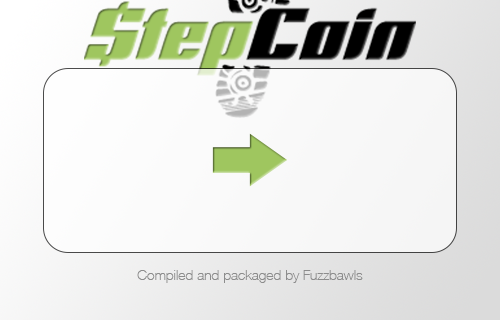
<style>
.page{position:relative;width:500px;height:320px}
.page>*{position:absolute;margin:0}
.t1{font:14px "HelveticaNeue-Thin";color:#8c8c8c}
</style>
<div class="page">
<p class="t1" style="left:137px;top:270px;width:226px;height:13px">Compiled and packaged by Fuzzbawls</p>
</div>
